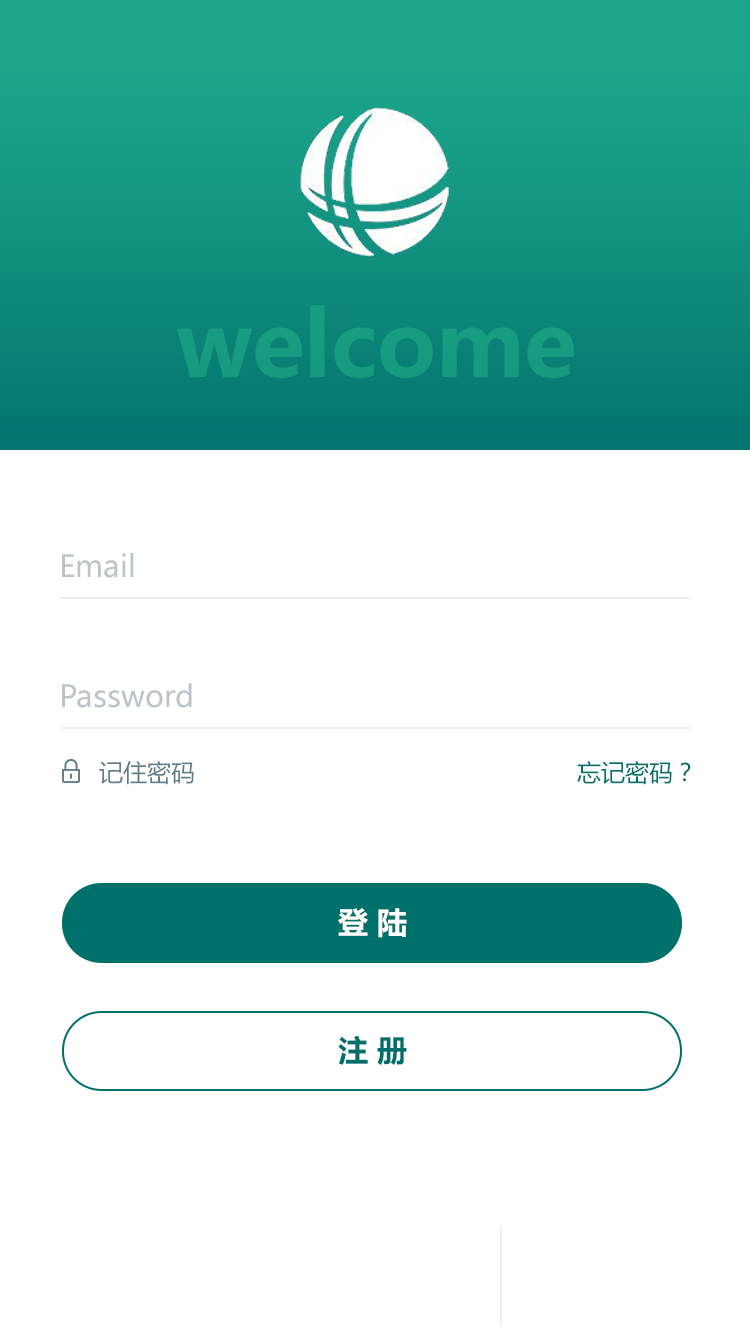
<style>
.page{position:relative;width:750px;height:1334px;background:#ffffff}
.page>*{position:absolute;margin:0}
.t1{font:90px "MicrosoftYaHei-Bold";color:#189b81}
.t2{font:30px "MicrosoftYaHei";color:#bac4ca}
.t3{font:24px "MicrosoftYaHei";color:#607d8b}
.t4{font:24px "MicrosoftYaHei";color:#00706b}
.t5{font:30px "MicrosoftYaHei-Bold";color:#ffffff}
.t6{font:30px "MicrosoftYaHei-Bold";color:#00706b}
</style>
<div class="page">
<p class="t1" style="left:176px;top:305px;width:398px;height:73px">welcome</p>
<p class="t2" style="left:62px;top:553px;width:72px;height:25px">Email</p>
<p class="t2" style="left:62px;top:683px;width:130px;height:25px">Password</p>
<p class="t3" style="left:99px;top:761px;width:95px;height:24px">记住密码</p>
<p class="t4" style="left:577px;top:761px;width:114px;height:24px">忘记密码？</p>
<p class="t5" style="left:338px;top:908px;width:69px;height:30px">登 陆</p>
<p class="t6" style="left:338px;top:1035px;width:69px;height:30px">注 册</p>
</div>
